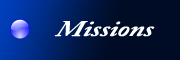
<style>
.page{position:relative;width:180px;height:60px;background:#000c25}
.page>*{position:absolute;margin:0}
.t1{font:22.2px "ACaslonPro-BoldItalic";color:#ffffff;font-style:italic;scale:1.25 1}
</style>
<div class="page">
<p class="t1" style="left:54px;top:21px;width:101px;height:16px">Missions</p>
</div>
